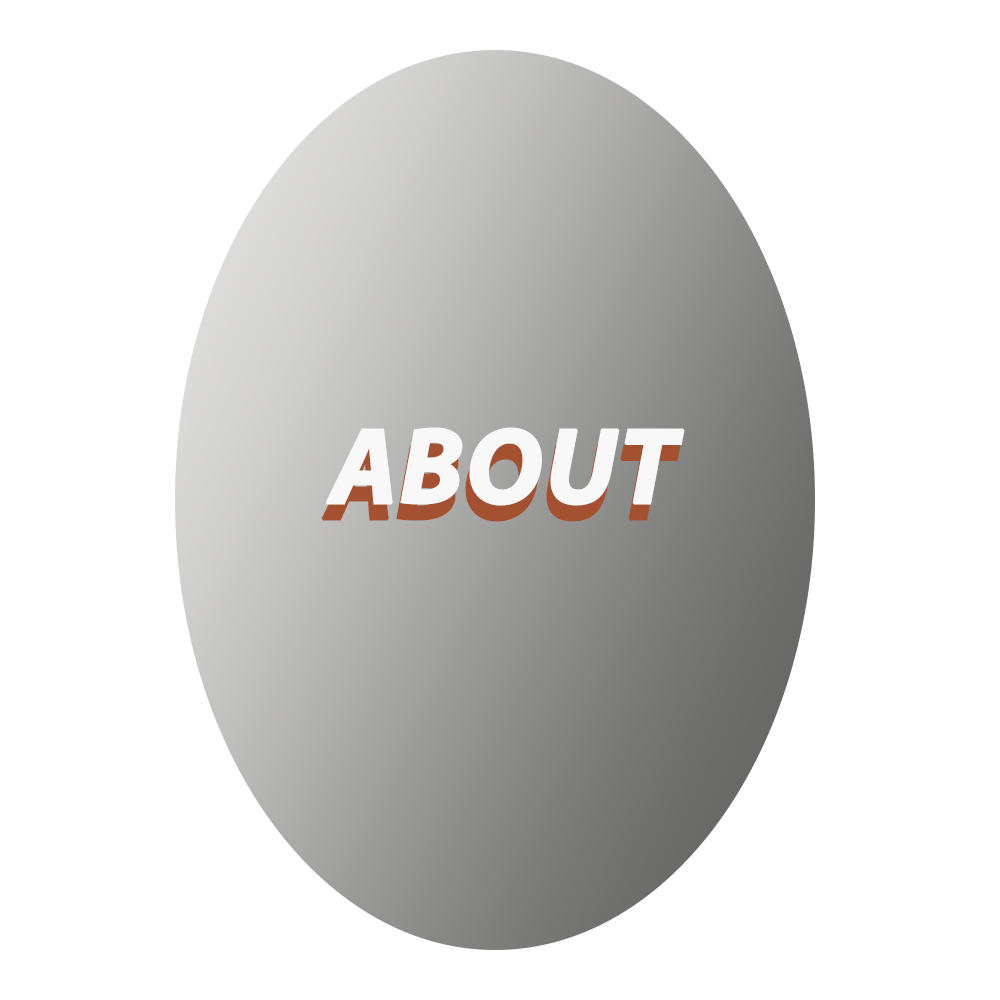
<style>
.page{position:relative;width:1000px;height:1000px;background:#ffffff}
.page>*{position:absolute;margin:0}
.t1{font:108.3px "MyriadPro-BoldIt";color:#f9f8f8;text-transform:uppercase;font-weight:bold}
.t2{font:125px "MyriadPro-Regular";color:#fdfdfc}
.t3{font:108.3px "MyriadPro-BoldIt";text-transform:uppercase;font-weight:bold}
.t4{font:125px "MyriadPro-Regular"}
</style>
<div class="page">
<p class="t1" style="left:325px;top:427px;width:360px;height:79px"><span class="t2"><br><br><br></span>About</p>
<p class="t3" style="left:321px;top:443px;width:360px;height:79px"><span class="t4"><br><br><br></span>About</p>
</div>
